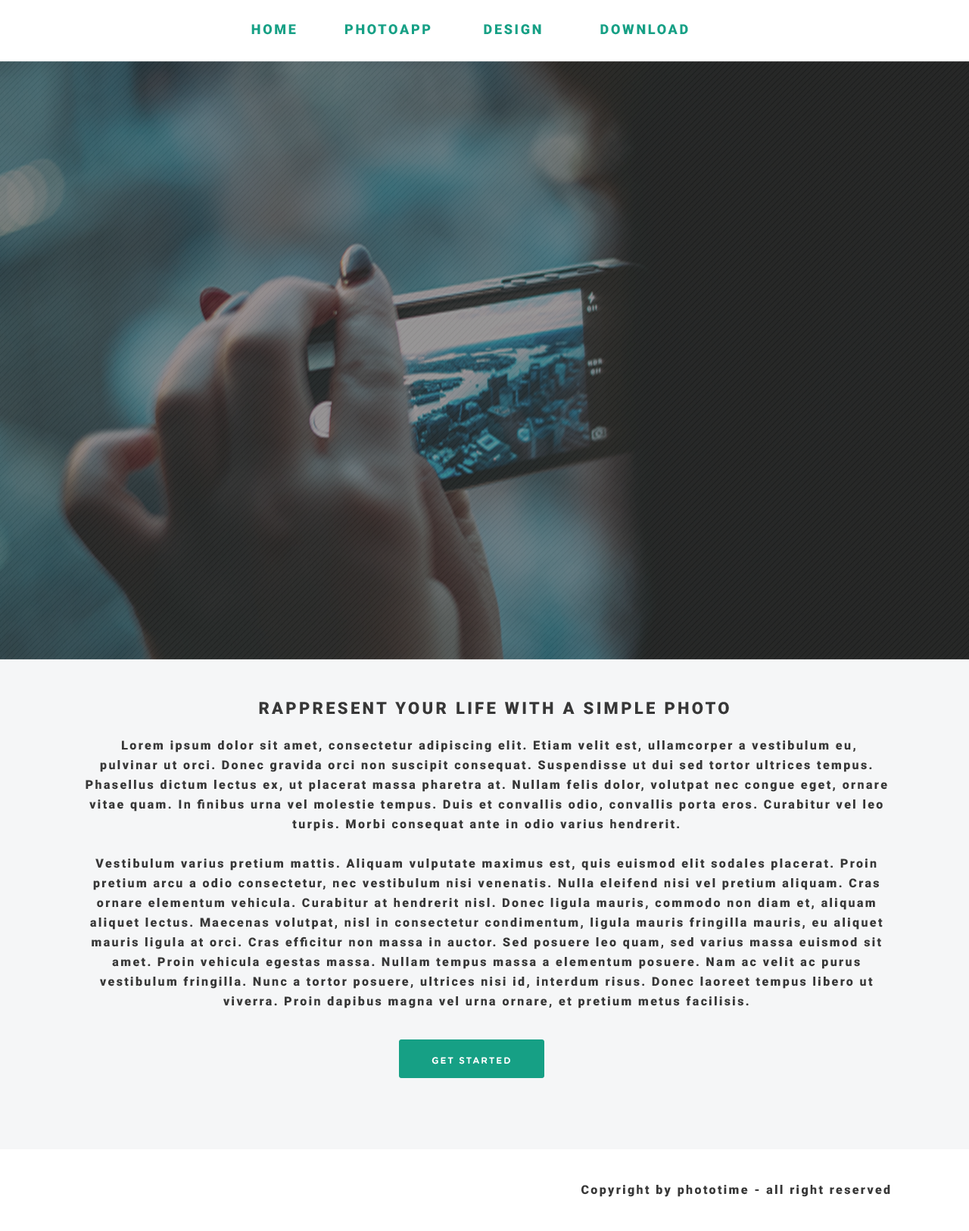
<style>
.page{position:relative;width:969px;height:1231px;background:#f5f6f7}
.page>*{position:absolute;margin:0}
.t1{font:13.6px "Roboto-Black";letter-spacing:0.15em;color:#16a085;text-transform:uppercase}
.t2{font:16.7px "Roboto-Black";letter-spacing:0.15em;color:#373737;text-transform:uppercase}
.t3{font:12.1px/19.7px "Roboto-Black";letter-spacing:0.15em;color:#373737}
.t4{font:9.1px "GothamRounded-Bold";letter-spacing:0.15em;color:#ffffff;text-transform:uppercase}
.t5{font:12.1px "Roboto-Black";letter-spacing:0.15em;color:#373737}
</style>
<div class="page">
<p class="t1" style="left:251px;top:24px;width:45px;height:11px">Home</p>
<p class="t1" style="left:345px;top:24px;width:86px;height:11px">photoapp</p>
<p class="t1" style="left:484px;top:24px;width:57px;height:11px">design</p>
<p class="t1" style="left:600px;top:24px;width:88px;height:11px">download</p>
<p class="t2" style="left:259px;top:702px;width:470px;height:13px">Rappresent your life with a simple photo</p>
<p class="t3" style="left:86px;top:740px;width:801px;height:268px;text-align:center">Lorem ipsum dolor sit amet, consectetur adipiscing elit. Etiam velit est, ullamcorper a vestibulum eu, pulvinar ut orci. Donec gravida orci non suscipit consequat. Suspendisse ut dui sed tortor ultrices tempus. Phasellus dictum lectus ex, ut placerat massa pharetra at. Nullam felis dolor, volutpat nec congue eget, ornare vitae quam. In finibus urna vel molestie tempus. Duis et convallis odio, convallis porta eros. Curabitur vel leo turpis. Morbi consequat ante in odio varius hendrerit.<br><br>Vestibulum varius pretium mattis. Aliquam vulputate maximus est, quis euismod elit sodales placerat. Proin pretium arcu a odio consectetur, nec vestibulum nisi venenatis. Nulla eleifend nisi vel pretium aliquam. Cras ornare elementum vehicula. Curabitur at hendrerit nisl. Donec ligula mauris, commodo non diam et, aliquam aliquet lectus. Maecenas volutpat, nisl in consectetur condimentum, ligula mauris fringilla mauris, eu aliquet mauris ligula at orci. Cras efficitur non massa in auctor. Sed posuere leo quam, sed varius massa euismod sit amet. Proin vehicula egestas massa. Nullam tempus massa a elementum posuere. Nam ac velit ac purus vestibulum fringilla. Nunc a tortor posuere, ultrices nisi id, interdum risus. Donec laoreet tempus libero ut viverra. Proin dapibus magna vel urna ornare, et pretium metus facilisis.</p>
<p class="t4" style="left:431px;top:1057px;width:79px;height:7px">get started</p>
<p class="t5" style="left:581px;top:1185px;width:309px;height:12px">Copyright by phototime - all right reserved</p>
</div>
